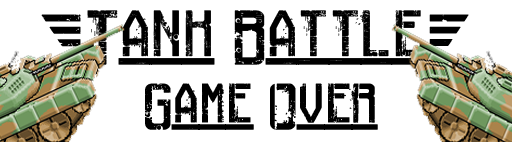
<style>
.page{position:relative;width:512px;height:142px;background:#ffffff}
.page>*{position:absolute;margin:0}
.t1{font:40px "RailwayToHells";color:#000000}
.t2{font:36px "RailwayToHells";color:#000000}
.t3{font:34px "RailwayToHells";color:#000000}
</style>
<div class="page">
<p class="t1" style="left:41px;top:10px;width:428px;height:55px"><span class="t2">[</span>Tank Battle<span class="t2">]</span></p>
<p class="t3" style="left:145px;top:83px;width:233px;height:47px">Game Over</p>
</div>
